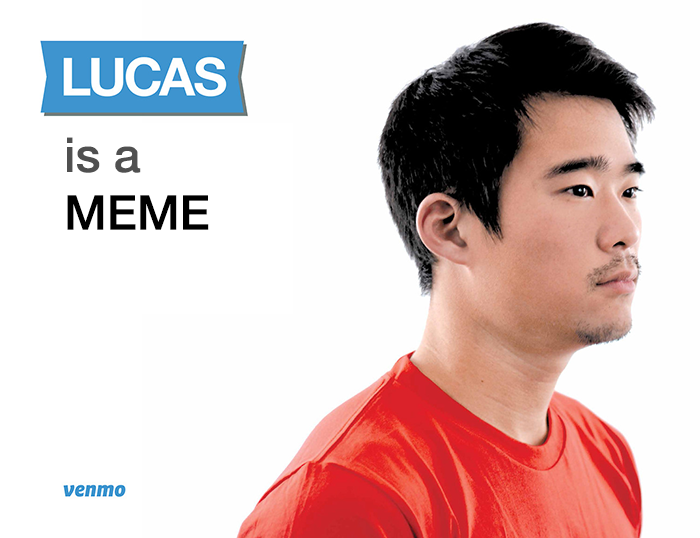
<style>
.page{position:relative;width:700px;height:538px;background:#fefefe}
.page>*{position:absolute;margin:0}
.t1{font:48px "HelveticaNeueLT-Medium";color:#505050}
.t2{font:48px "HelveticaNeueLT-Medium";color:#000000}
</style>
<div class="page">
<p class="t1" style="left:67px;top:137px;width:142px;height:93px">is a<br><span class="t2">MEME</span></p>
</div>
